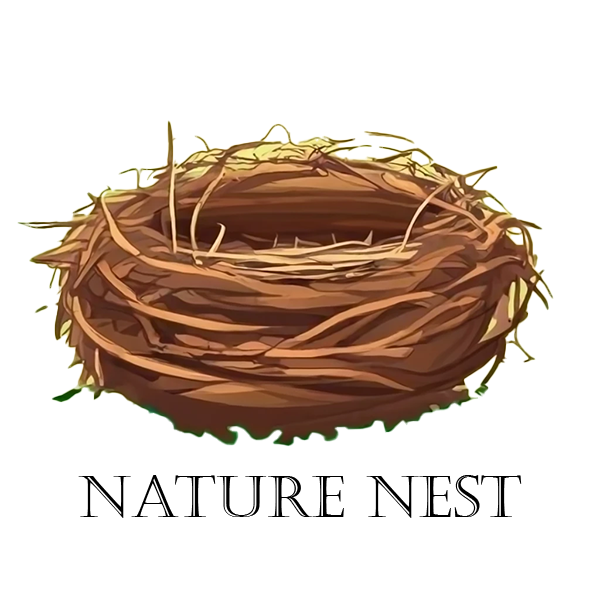
<style>
.page{position:relative;width:600px;height:600px;background:#ffffff}
.page>*{position:absolute;margin:0}
.t1{font:58.3px "Castellar";color:#000000}
</style>
<div class="page">
<p class="t1" style="left:78px;top:475px;width:444px;height:43px">Nature Nest</p>
</div>
